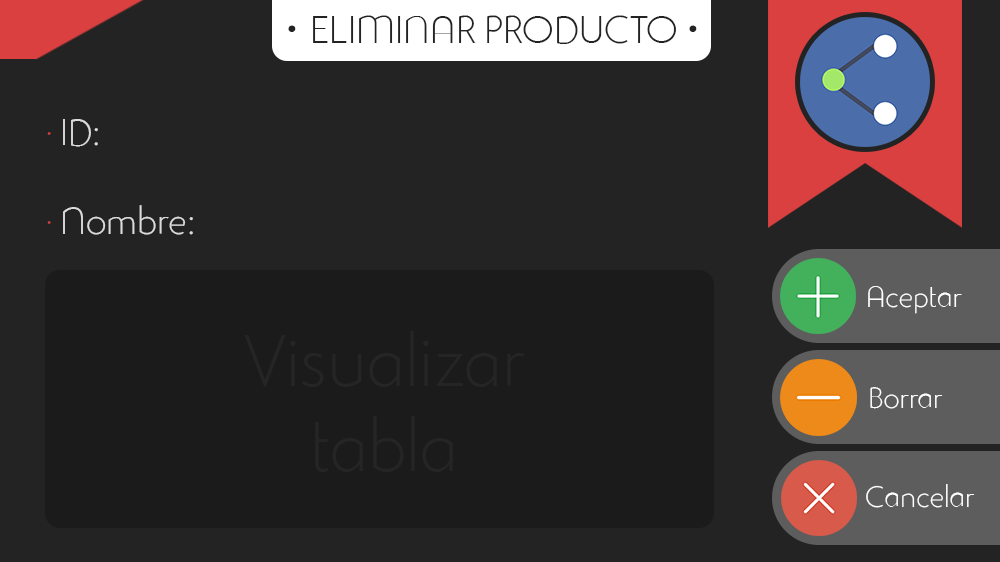
<style>
.page{position:relative;width:1000px;height:562px;background:#232323}
.page>*{position:absolute;margin:0}
.t1{font:38px "StudioGothicAlternateTrial-Extr";color:#232323}
.t2{font:97px "StudioGothicAlternateTrial-Extr";color:#232323}
.t3{font:37px "StudioGothicAlternateTrial-Extr";color:#dbdbdb}
.t4{font:37px "StudioGothicAlternateTrial-Extr";color:#d63f3f}
.t5{font:29px "StudioGothicAlternateTrial-Extr";color:#ffffff}
.t6{font:71px "StudioGothicAlternateTrial-Extr";color:#252525}
</style>
<div class="page">
<p class="t1" style="left:313px;top:15px;width:363px;height:29px">ELIMINAR PRODUCTO</p>
<p class="t2" style="left:288px;top:25px;width:409px;height:7px">·                 ·</p>
<p class="t3" style="left:47px;top:119px;width:146px;height:116px"><span class="t4">· </span>ID:<br><span class="t4"><br>· </span>Nombre:</p>
<p class="t5" style="left:868px;top:286px;width:94px;height:28px">Aceptar</p>
<p class="t6" style="left:244px;top:331px;width:281px;height:141px;text-align:center">Visualizar<br>tabla</p>
<p class="t5" style="left:870px;top:387px;width:73px;height:22px">Borrar</p>
<p class="t5" style="left:866px;top:484px;width:109px;height:24px">Cancelar</p>
</div>
